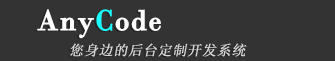
<style>
.page{position:relative;width:335px;height:61px;background:#333333}
.page>*{position:absolute;margin:0}
.t1{font:30px "BodoniMT";letter-spacing:0.025em;color:#ffffff;font-weight:bold}
.t2{font:30px "BodoniMT";letter-spacing:0.025em;color:#1bfcff;font-weight:bold}
.t3{font:14px "SimSun";letter-spacing:0.025em;color:#d8d8d8;font-weight:bold;font-style:italic}
</style>
<div class="page">
<p class="t1" style="left:37px;top:9px;width:124px;height:30px">Any<span class="t2">C</span>ode</p>
<p class="t3" style="left:70px;top:43px;width:177px;height:14px">您身边的后台定制开发系统</p>
</div>
